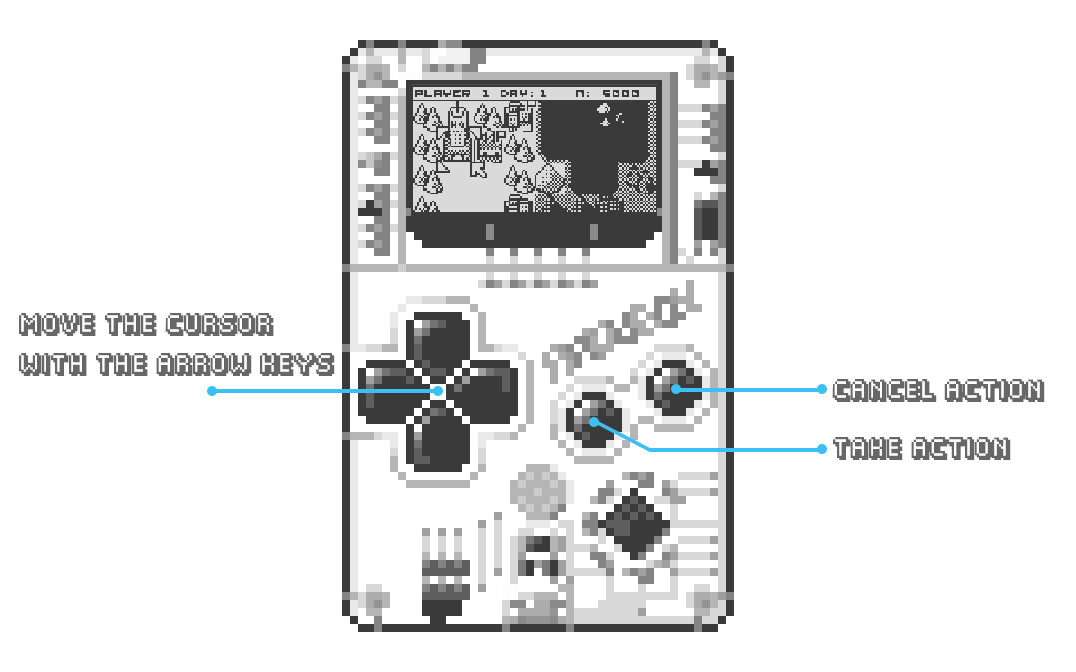
<style>
.page{position:relative;width:1076px;height:672px;background:#ffffff}
.page>*{position:absolute;margin:0}
.t1{font:18px/40px "Fipps-Regular";color:#676767;text-transform:uppercase}
.t2{font:18px "Fipps-Regular";color:#676767;text-transform:uppercase}
</style>
<div class="page">
<p class="t1" style="left:19px;top:313px;width:316px;height:63px">Move the cursor with the arrow keys</p>
<p class="t2" style="left:832px;top:379px;width:213px;height:23px">Cancel Action</p>
<p class="t2" style="left:833px;top:437px;width:178px;height:23px">Take Action</p>
</div>
